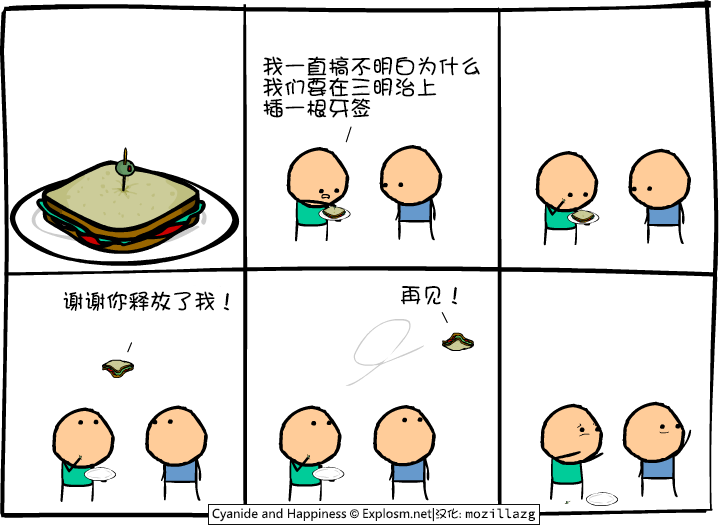
<style>
.page{position:relative;width:720px;height:525px;background:#ffffff}
.page>*{position:absolute;margin:0}
.t1{font:22px/21px "DFGirl";color:#000000}
.t2{font:22px "DFGirl";color:#000000}
</style>
<div class="page">
<p class="t1" style="left:263px;top:56px;width:217px;height:62px">我一直搞不明白为什么<br>我们要在三明治上<br>插一根牙签</p>
<p class="t2" style="left:63px;top:291px;width:167px;height:20px">谢谢你释放了我！</p>
<p class="t2" style="left:401px;top:286px;width:57px;height:19px">再见！</p>
</div>
